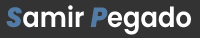
<style>
.page{position:relative;width:200px;height:38px;background:#333333}
.page>*{position:absolute;margin:0}
.t1{font:27.7px "Poppins-SemiBold";color:#ffffff;scale:0.93 1}
.t2{font:27.7px "Poppins-ExtraBoldItalic";color:#527ca6;scale:0.93 1}
</style>
<div class="page">
<p class="t1" style="left:6px;top:5px;width:185px;height:30px"><span class="t2">S</span>amir <span class="t2">P</span>egado</p>
</div>
